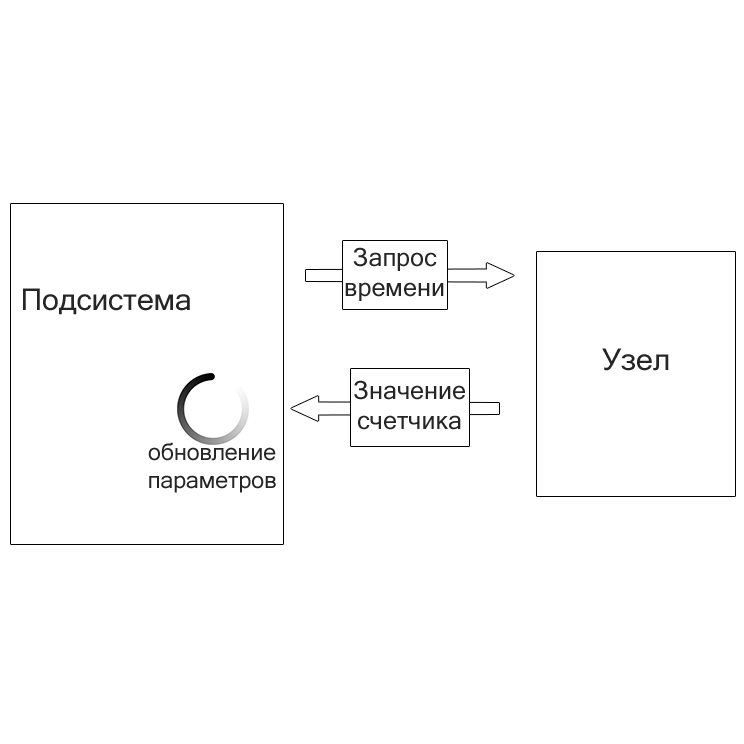
<style>
.page{position:relative;width:744px;height:744px;background:#ffffff}
.page>*{position:absolute;margin:0}
.t1{font:25px "MicrosoftSansSerif";color:#252525}
.t2{font:30px "MicrosoftSansSerif";color:#252525}
.t3{font:23px "MicrosoftSansSerif";color:#252525}
</style>
<div class="page">
<p class="t1" style="left:345px;top:247px;width:99px;height:54px;text-align:center">Запрос<br>времени</p>
<p class="t2" style="left:23px;top:288px;width:167px;height:27px">Подсистема</p>
<p class="t2" style="left:602px;top:348px;width:67px;height:23px">Узел</p>
<p class="t1" style="left:354px;top:380px;width:111px;height:50px;text-align:center">Значение<br>счетчика</p>
<p class="t3" style="left:148px;top:442px;width:128px;height:51px;text-align:center">обновление<br>параметров</p>
</div>
